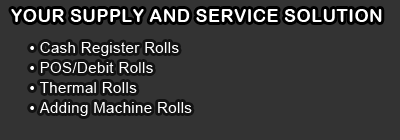
<style>
.page{position:relative;width:400px;height:140px;background:#333333}
.page>*{position:absolute;margin:0}
.t1{font:18px "ArialRoundedMTBold";letter-spacing:0.025em;color:#ffffff}
.t2{font:15px/8px "ArialMT";letter-spacing:0.025em;color:#ffffff}
</style>
<div class="page">
<p class="t1" style="left:11px;top:9px;width:371px;height:13px">YOUR SUPPLY AND SERVICE SOLUTION</p>
<p class="t2" style="left:30px;top:42px;width:162px;height:74px">• Cash Register Rolls<br>• POS/Debit Rolls<br>• Thermal Rolls<br>• Adding Machine Rolls</p>
</div>
